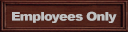
<style>
.page{position:relative;width:128px;height:32px}
.page>*{position:absolute;margin:0}
.t1{font:12px "Arial-Black";letter-spacing:-0.06em;color:#c0c0c0;scale:1.11 1}
</style>
<div class="page">
<p class="t1" style="left:12px;top:11px;width:105px;height:12px">Employees Only</p>
</div>
